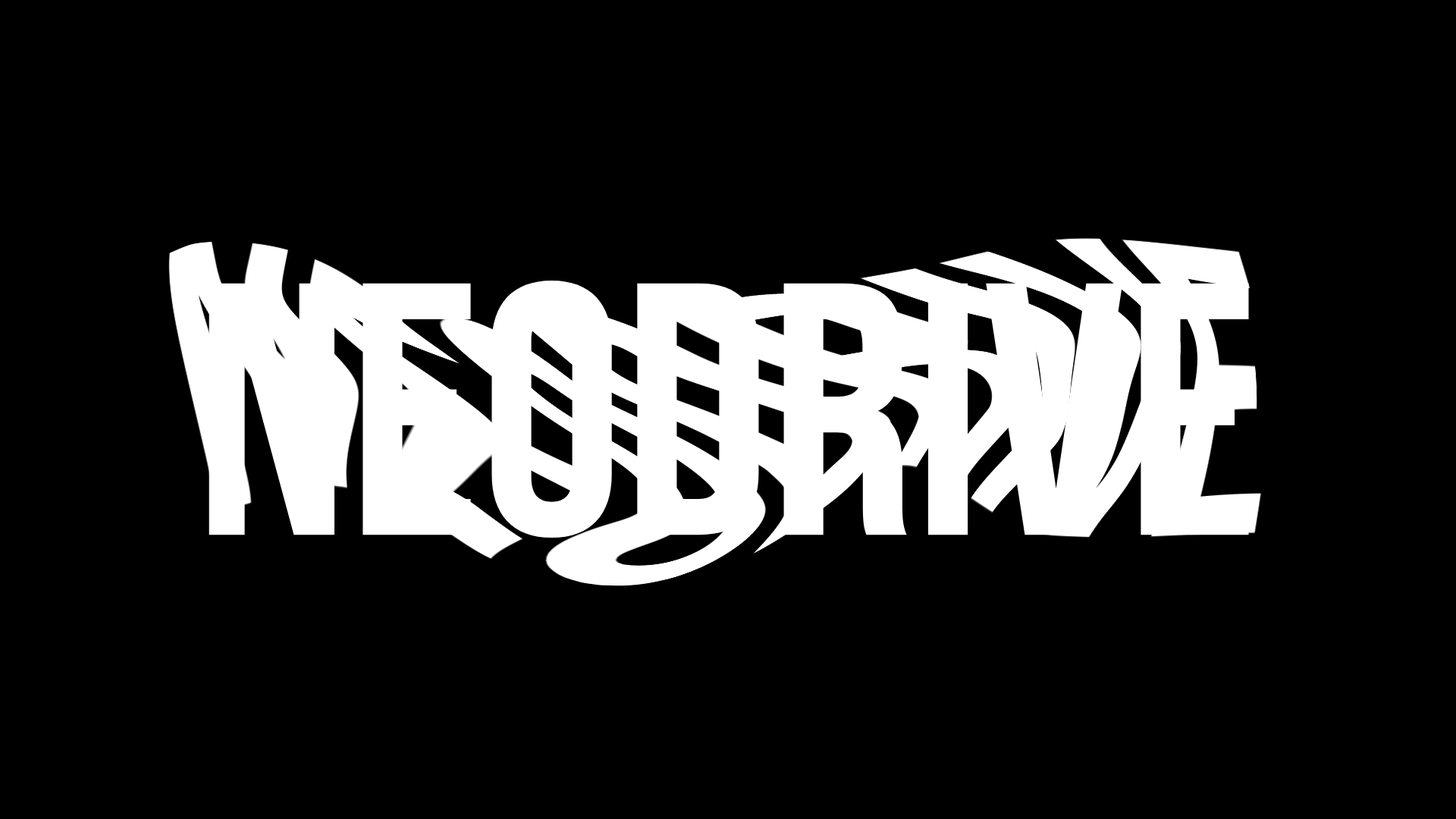
<style>
.page{position:relative;width:1456px;height:819px;background:#000000}
.page>*{position:absolute;margin:0}
.t1{font:359.2px "BebasNeueBold";color:#ffffff}
</style>
<div class="page">
<p class="t1" style="left:209px;top:281px;width:1040px;height:257px">NEODRIVE</p>
</div>
